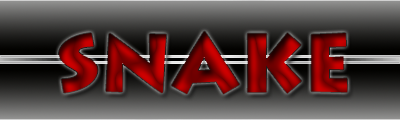
<style>
.page{position:relative;width:400px;height:120px}
.page>*{position:absolute;margin:0}
.t1{font:80px "LithosPro-Black"}
</style>
<div class="page">
<p class="t1" style="left:59px;top:31px;width:289px;height:63px">SNAKE</p>
</div>
